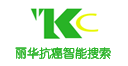
<style>
.page{position:relative;width:128px;height:66px;background:#ffffff}
.page>*{position:absolute;margin:0}
.t1{font:12px "YouYuan";color:#28b326}
</style>
<div class="page">
<p class="t1" style="left:15px;top:47px;width:96px;height:12px">丽华抗癌智能搜索</p>
<p class="t1" style="left:15px;top:47px;width:96px;height:12px">丽华抗癌智能搜索</p>
</div>
